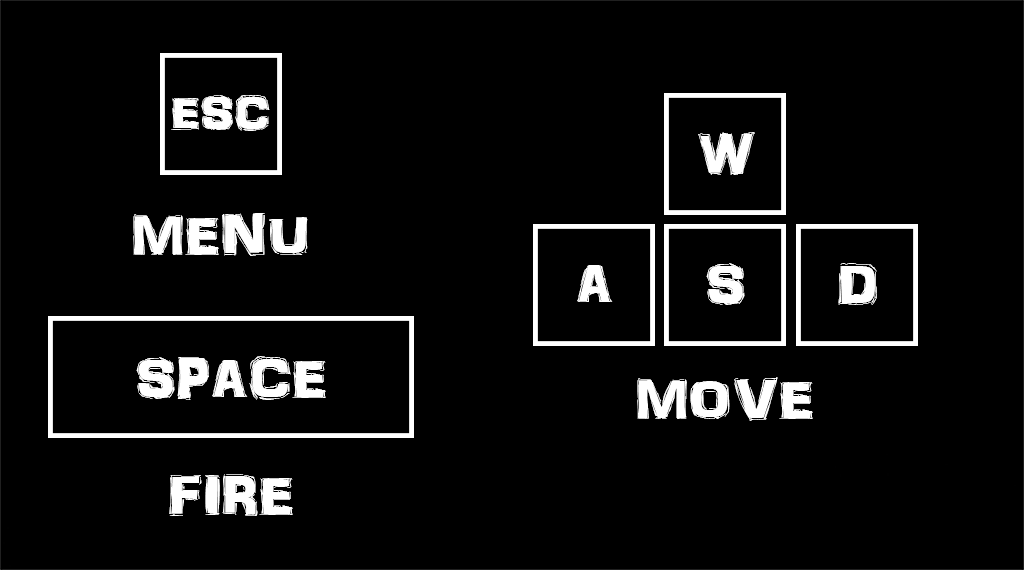
<style>
.page{position:relative;width:1024px;height:570px;background:#000000}
.page>*{position:absolute;margin:0}
.t1{font:48.7px "ARDARLING";color:#ffffff}
.t2{font:58.5px "ARDARLING";color:#ffffff}
</style>
<div class="page">
<p class="t1" style="left:171px;top:95px;width:99px;height:36px">ESC</p>
<p class="t2" style="left:698px;top:132px;width:57px;height:43px">W</p>
<p class="t2" style="left:133px;top:213px;width:175px;height:43px">MENU</p>
<p class="t2" style="left:577px;top:265px;width:36px;height:37px">A</p>
<p class="t2" style="left:706px;top:263px;width:39px;height:42px">S</p>
<p class="t2" style="left:838px;top:263px;width:39px;height:42px">D</p>
<p class="t2" style="left:136px;top:356px;width:190px;height:44px">SPACE</p>
<p class="t2" style="left:637px;top:377px;width:176px;height:44px">MOVE</p>
<p class="t2" style="left:169px;top:474px;width:124px;height:42px">FIRE</p>
</div>
